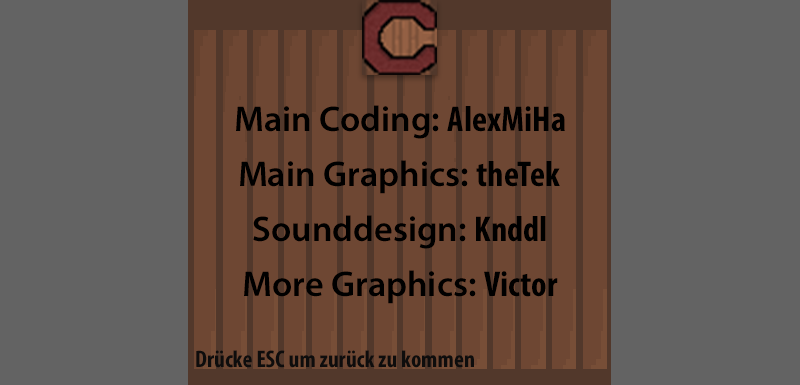
<style>
.page{position:relative;width:800px;height:385px;background:#636363}
.page>*{position:absolute;margin:0}
.t1{font:36px "MyriadPro-Semibold";color:#000000}
.t2{font:36px "MyriadPro-BoldCond";color:#000000}
.t3{font:24px "MyriadPro-BoldCond";color:#0e0d0d}
</style>
<div class="page">
<p class="t1" style="left:236px;top:105px;width:329px;height:34px">Main Coding: <span class="t2">AlexMiHa</span></p>
<p class="t1" style="left:240px;top:160px;width:320px;height:34px">Main Graphics: <span class="t2">theTek</span></p>
<p class="t1" style="left:253px;top:215px;width:293px;height:34px">Sounddesign: <span class="t2">Knddl</span></p>
<p class="t1" style="left:244px;top:270px;width:314px;height:34px">More Graphics: <span class="t2">Victor</span></p>
<p class="t3" style="left:196px;top:350px;width:278px;height:18px">Drücke ESC um zurück zu kommen</p>
</div>
